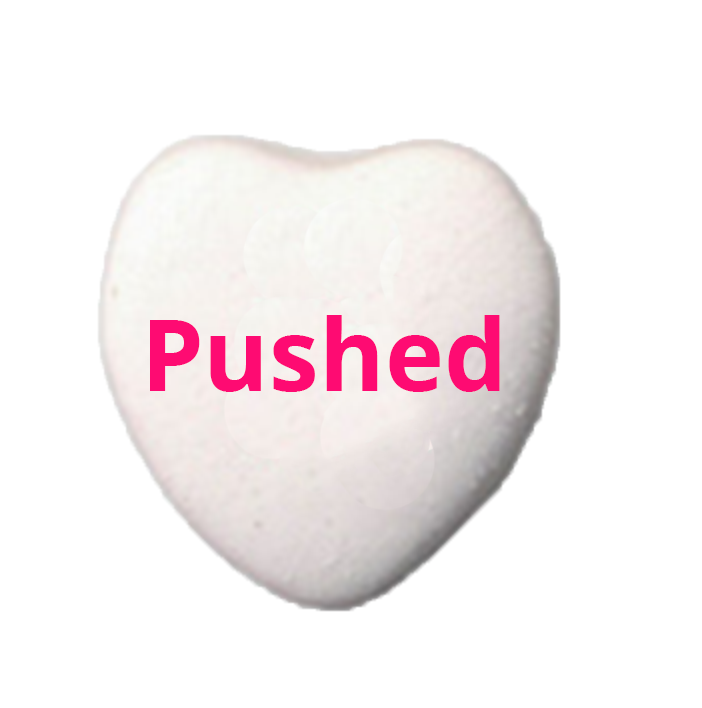
<style>
.page{position:relative;width:702px;height:708px;background:#ffffff}
.page>*{position:absolute;margin:0}
.t1{font:100px "OpenSans-Bold";color:#fe0b72}
</style>
<div class="page">
<p class="t1" style="left:150px;top:315px;width:350px;height:77px">Pushed</p>
</div>
